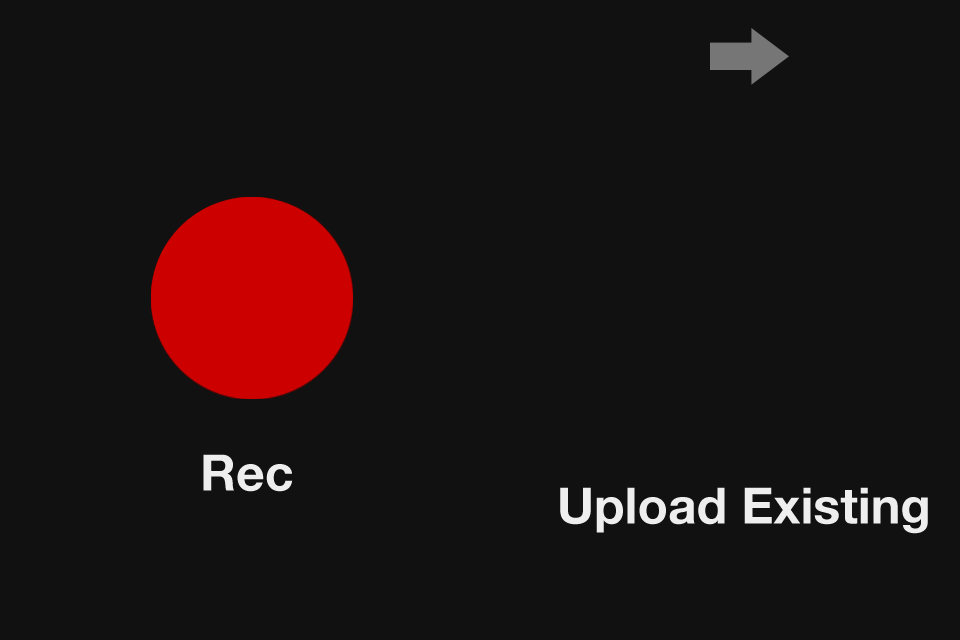
<style>
.page{position:relative;width:960px;height:640px;background:#111111}
.page>*{position:absolute;margin:0}
.t1{font:50px "HelveticaNeue-Bold";color:#eeeeee}
</style>
<div class="page">
<p class="t1" style="left:203px;top:454px;width:90px;height:38px">Rec</p>
<p class="t1" style="left:560px;top:487px;width:368px;height:47px">Upload Existing</p>
</div>
